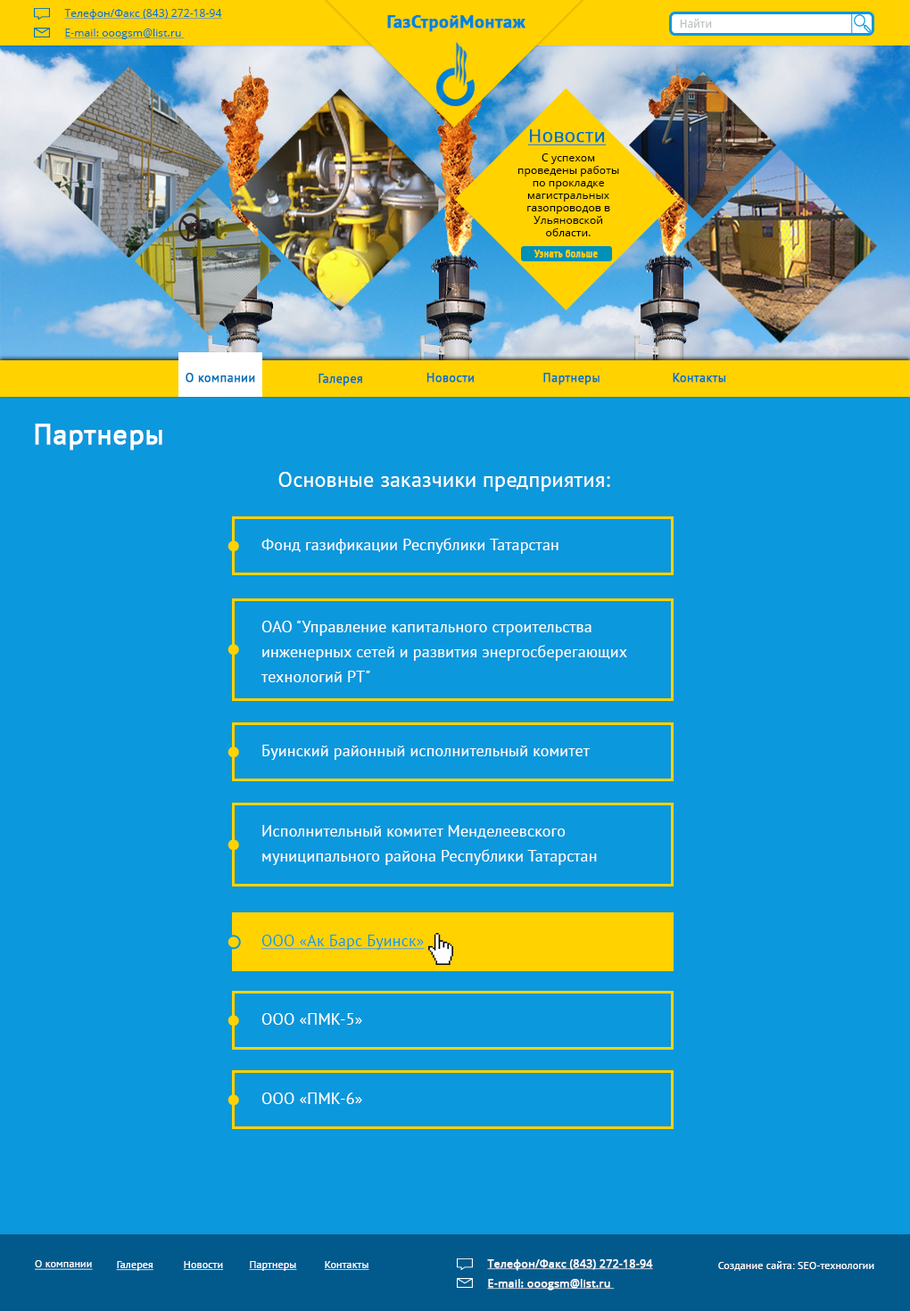
<style>
.page{position:relative;width:910px;height:1311px;background:#0c98dc}
.page>*{position:absolute;margin:0}
.t1{font:10.7px/10.7px "OpenSans";letter-spacing:0.01em;color:#0072bc;text-decoration:underline}
.t2{font:17.8px "PTSans-Bold";letter-spacing:0.01em;color:#0084d8;font-weight:bold}
.t3{font:14.3px "PTSans-Regular";letter-spacing:0.01em;color:#0084d8;font-weight:bold}
.t4{font:11.4px "OpenSans";letter-spacing:0.01em;color:#b9bcbd;scale:0.92 1}
.t5{font:17.8px "OpenSans";letter-spacing:0.01em;color:#0072bc;font-weight:bold;text-decoration:underline}
.t6{font:10.7px/12.5px "OpenSans";letter-spacing:0.01em;color:#000000}
.t7{font:9.6px "PTSans-Regular";letter-spacing:0.01em;color:#ffd200;font-weight:bold}
.t8{font:12.5px "PTSans-Regular";letter-spacing:0.01em;color:#0072bc;font-weight:bold}
.t9{font:12.5px "PTSans-Regular";letter-spacing:0.01em;color:#0072bb;font-weight:bold}
.t10{font:28.5px "PTSans-Regular";letter-spacing:0.01em;color:#ffffff;font-weight:bold}
.t11{font:21.4px "PTSans-Regular";letter-spacing:0.01em;color:#ffffff}
.t12{font:16.1px "PTSans-Regular";letter-spacing:0.01em;color:#ffffff}
.t13{font:16.1px/16.1px "PTSans-Regular";letter-spacing:0.01em;color:#ffffff}
.t14{font:16.1px "PTSans-Regular";letter-spacing:0.01em;color:#0c98dc;text-decoration:underline}
.t15{font:10.7px "PTSans-Regular";letter-spacing:0.01em;color:#ffffff;text-decoration:underline}
.t16{font:10.7px/10.7px "OpenSans";letter-spacing:0.01em;color:#ffffff;font-weight:bold;text-decoration:underline}
.t17{font:10.7px "PTSans-Regular";letter-spacing:0.01em;color:#ffffff}
</style>
<div class="page">
<p class="t1" style="left:64px;top:9px;width:158px;height:30px">Телефон/Факс (843) 272-18-94<br>E-mail: ooogsm@list.ru</p>
<p class="t2" style="left:387px;top:15px;width:139px;height:17px"><span class="t3"><br></span>ГазСтройМонтаж</p>
<p class="t4" style="left:680px;top:19px;width:32px;height:10px">Найти</p>
<p class="t5" style="left:527px;top:129px;width:79px;height:16px">Новости</p>
<p class="t6" style="left:517px;top:153px;width:102px;height:83px;text-align:center">С успехом проведены работы по прокладке магистральных газопроводов в Ульяновской области.</p>
<p class="t7" style="left:533px;top:250px;width:64px;height:8px">Узнать больше</p>
<p class="t8" style="left:185px;top:373px;width:70px;height:10px">О компании</p>
<p class="t8" style="left:318px;top:374px;width:44px;height:12px">Галерея</p>
<p class="t8" style="left:426px;top:373px;width:48px;height:10px">Новости</p>
<p class="t8" style="left:543px;top:373px;width:56px;height:12px">Партнеры</p>
<p class="t9" style="left:672px;top:373px;width:54px;height:10px">Контакты</p>
<p class="t10" style="left:35px;top:424px;width:127px;height:26px">Партнеры</p>
<p class="t11" style="left:278px;top:472px;width:332px;height:19px">Основные заказчики предприятия:</p>
<p class="t12" style="left:261px;top:538px;width:297px;height:16px">Фонд газификации Республики Татарстан</p>
<p class="t13" style="left:260px;top:621px;width:367px;height:61px;text-align:justify">ОАО "Управление капитального строительства <br>инженерных сетей и развития энергосберегающих <br>технологий РТ"</p>
<p class="t12" style="left:262px;top:745px;width:327px;height:15px">Буинский районный исполнительный комитет</p>
<p class="t13" style="left:262px;top:825px;width:335px;height:40px;text-align:justify">Исполнительный комитет Менделеевского <br>муниципального района Республики Татарстан</p>
<p class="t14" style="left:261px;top:935px;width:163px;height:15px">ООО «Ак Барс Буинск»</p>
<p class="t12" style="left:261px;top:1013px;width:101px;height:12px">ООО «ПМК-5»</p>
<p class="t12" style="left:261px;top:1092px;width:101px;height:12px">ООО «ПМК-6»</p>
<p class="t15" style="left:35px;top:1260px;width:58px;height:10px">О компании</p>
<p class="t15" style="left:116px;top:1261px;width:37px;height:10px">Галерея</p>
<p class="t15" style="left:183px;top:1261px;width:41px;height:9px">Новости</p>
<p class="t15" style="left:249px;top:1261px;width:48px;height:10px">Партнеры</p>
<p class="t15" style="left:324px;top:1261px;width:45px;height:9px">Контакты</p>
<p class="t16" style="left:487px;top:1259px;width:166px;height:31px">Телефон/Факс (843) 272-18-94<br>E-mail: ooogsm@list.ru</p>
<p class="t17" style="left:718px;top:1261px;width:156px;height:10px">Создание сайта: SEO-технологии</p>
</div>
